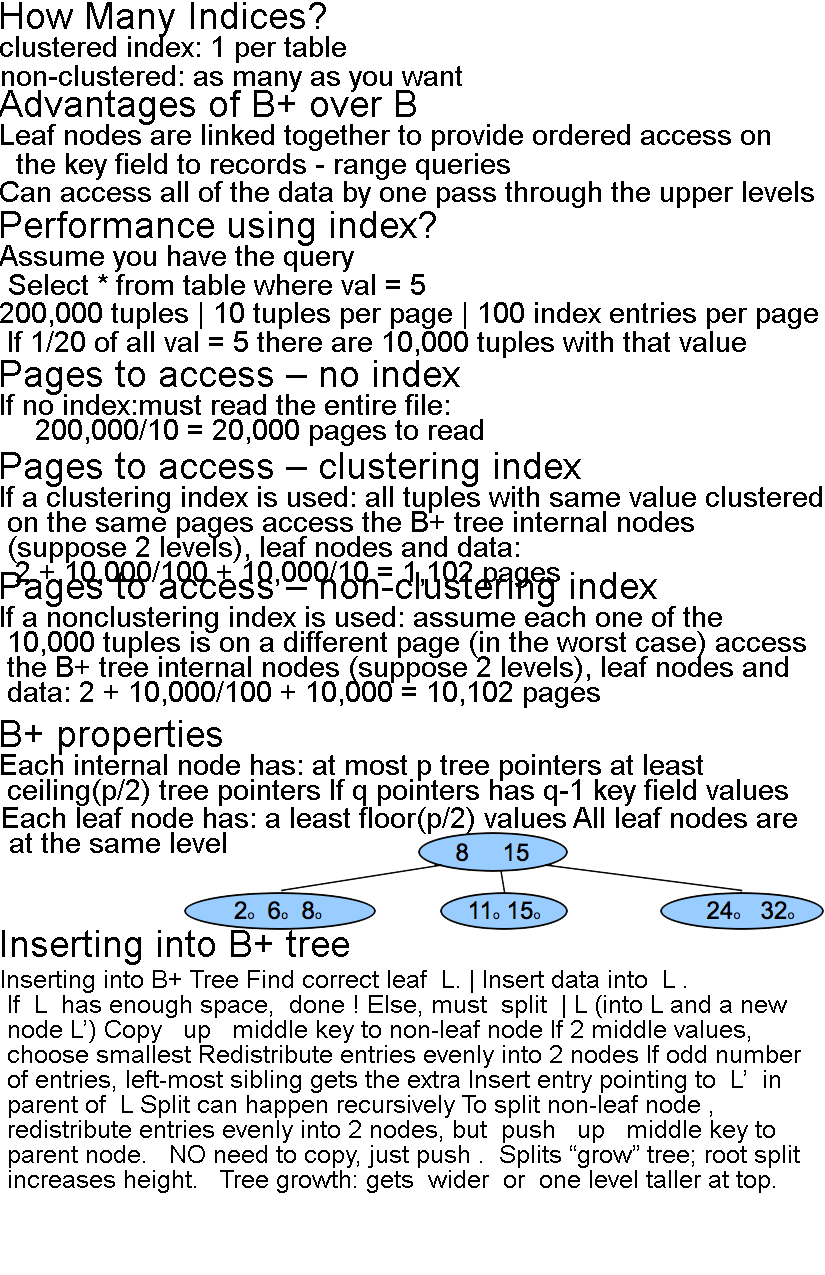
<style>
.page{position:relative;width:825px;height:1275px;background:#ffffff}
.page>*{position:absolute;margin:0}
.t1{font:37.5px "ArialMT";color:#000000}
.t2{font:29.2px "ArialMT";color:#000000}
.t3{font:29.2px/29.2px "ArialMT";color:#000000}
.t4{font:29.2px/25px "ArialMT";color:#000000}
.t5{font:25px/25px "ArialMT";color:#000000}
</style>
<div class="page">
<p class="t1" style="left:1px;top:2px;width:325px;height:35px">How Many Indices?</p>
<p class="t2" style="left:0px;top:36px;width:346px;height:27px">clustered index: 1 per table</p>
<p class="t2" style="left:2px;top:65px;width:460px;height:27px">non-clustered: as many as you want</p>
<p class="t1" style="left:0px;top:90px;width:416px;height:35px">Advantages of B+ over B</p>
<p class="t2" style="left:1px;top:124px;width:769px;height:27px">Leaf nodes are linked together to provide ordered access on</p>
<p class="t2" style="left:16px;top:153px;width:494px;height:27px">the key field to records - range queries</p>
<p class="t2" style="left:0px;top:181px;width:814px;height:27px">Can access all of the data by one pass through the upper levels</p>
<p class="t1" style="left:1px;top:211px;width:435px;height:35px">Performance using index?</p>
<p class="t2" style="left:0px;top:245px;width:354px;height:27px">Assume you have the query</p>
<p class="t2" style="left:9px;top:274px;width:416px;height:21px">Select * from table where val = 5</p>
<p class="t3" style="left:0px;top:302px;width:818px;height:56px">200,000 tuples | 10 tuples per page | 100 index entries per page<br> If 1/20 of all val = 5 there are 10,000 tuples with that value</p>
<p class="t1" style="left:1px;top:360px;width:459px;height:35px">Pages to access – no index</p>
<p class="t4" style="left:1px;top:394px;width:482px;height:52px">If no index:must read the entire file: <br> 200,000/10 = 20,000 pages to read</p>
<p class="t1" style="left:1px;top:452px;width:580px;height:35px">Pages to access – clustering index</p>
<p class="t4" style="left:1px;top:486px;width:821px;height:102px">If a clustering index is used: all tuples with same value clustered<br> on the same pages access the B+ tree internal nodes<br> (suppose 2 levels), leaf nodes and data: <br>  2 + 10,000/100 + 10,000/10 = 1,102 pages</p>
<p class="t1" style="left:1px;top:572px;width:656px;height:35px">Pages to access – non-clustering index</p>
<p class="t4" style="left:1px;top:606px;width:805px;height:102px">If a nonclustering index is used: assume each one of the <br> 10,000 tuples is on a different page (in the worst case) access <br> the B+ tree internal nodes (suppose 2 levels), leaf nodes and <br> data: 2 + 10,000/100 + 10,000 = 10,102 pages</p>
<p class="t1" style="left:1px;top:720px;width:221px;height:35px">B+ properties</p>
<p class="t4" style="left:1px;top:754px;width:787px;height:52px">Each internal node has: at most p tree pointers at least <br> ceiling(p/2) tree pointers If q pointers has q-1 key field values</p>
<p class="t4" style="left:3px;top:807px;width:794px;height:46px">Each leaf node has: a least floor(p/2) values All leaf nodes are <br> at the same level</p>
<p class="t1" style="left:2px;top:930px;width:347px;height:35px">Inserting into B+ tree</p>
<p class="t5" style="left:2px;top:970px;width:799px;height:223px">Inserting into B+ Tree Find correct leaf  L. | Insert data into  L . <br> If  L  has enough space,  done ! Else, must  split  | L (into L and a new <br> node L’) Copy   up   middle key to non-leaf node If 2 middle values, <br> choose smallest Redistribute entries evenly into 2 nodes If odd number <br> of entries, left-most sibling gets the extra Insert entry pointing to  L’  in <br> parent of  L Split can happen recursively To split non-leaf node , <br> redistribute entries evenly into 2 nodes, but  push   up   middle key to <br> parent node.   NO need to copy, just push .  Splits “grow” tree; root split <br> increases height.   Tree growth: gets  wider  or  one level taller at top.</p>
</div>
